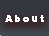
<style>
.page{position:relative;width:49px;height:36px;background:#33363d}
.page>*{position:absolute;margin:0}
.t1{font:10px "HeliosBlack";letter-spacing:0.14em;color:#ffffff}
</style>
<div class="page">
<p class="t1" style="left:5px;top:15px;width:39px;height:7px">About</p>
</div>
